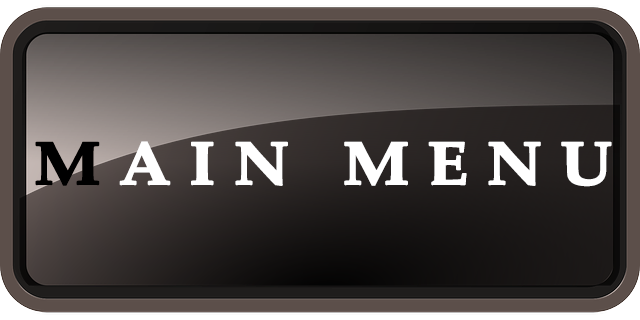
<style>
.page{position:relative;width:640px;height:320px}
.page>*{position:absolute;margin:0}
.t1{font:60px "PalatinoLinotype-Bold";letter-spacing:0.25em;color:#ffffff;font-weight:bold;scale:1.11 1}
.t2{font:60px "PalatinoLinotype-Bold";letter-spacing:0.25em;color:#000000;font-weight:bold;scale:1.11 1}
</style>
<div class="page">
<p class="t1" style="left:35px;top:141px;width:577px;height:46px"><span class="t2">M</span>AIN MENU</p>
</div>
